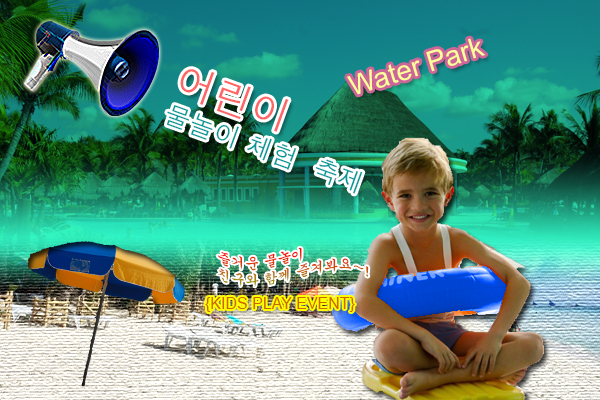
<style>
.page{position:relative;width:600px;height:400px}
.page>*{position:absolute;margin:0}
.t1{font:28px "ArialMT";color:#ffff99}
.t2{font:14px "Gungsuh"}
.t3{font:16.1px "ArialMT";color:#cc6600}
</style>
<div class="page">
<p class="t1" style="left:347px;top:38px;width:139px;height:57px;rotate:-17deg">Water Park</p>
<p class="t2" style="left:217px;top:247px;width:152px;height:40px">즐거운 물놀이<br>친구와 함께 즐겨봐요~!</p>
<p class="t3" style="left:205px;top:297px;width:150px;height:15px">{KIDS PLAY EVENT}</p>
</div>
